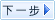
<style>
.page{position:relative;width:55px;height:20px}
.page>*{position:absolute;margin:0}
.t1{font:11px "YouYuan";letter-spacing:0.2em;color:#112538}
</style>
<div class="page">
<p class="t1" style="left:2px;top:5px;width:38px;height:11px">下一步</p>
</div>
